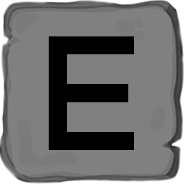
<style>
.page{position:relative;width:184px;height:184px;background:#808080}
.page>*{position:absolute;margin:0}
.t1{font:200px "SuperspaceBold";letter-spacing:0.12em;color:#000000}
</style>
<div class="page">
<p class="t1" style="left:48px;top:36px;width:86px;height:114px">E</p>
</div>
